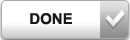
<style>
.page{position:relative;width:130px;height:40px;background:#ffffff}
.page>*{position:absolute;margin:0}
.t1{font:15px "Arial-BoldMT";color:#191a1c;text-transform:uppercase}
</style>
<div class="page">
<p class="t1" style="left:30px;top:13px;width:42px;height:12px">Done</p>
</div>
